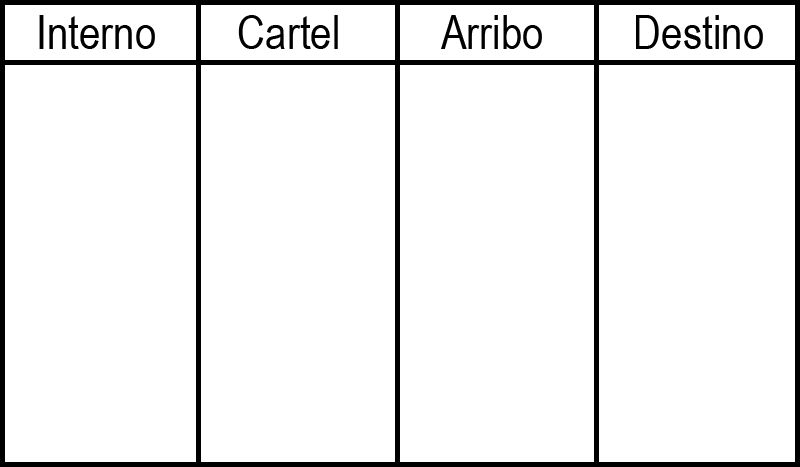
<style>
.page{position:relative;width:800px;height:467px;background:#ffffff}
.page>*{position:absolute;margin:0}
.t1{font:47px "ArialNarrow";color:#000000}
</style>
<div class="page">
<p class="t1" style="left:39px;top:15px;width:724px;height:34px">Interno     Cartel     Arribo        Destino</p>
</div>
